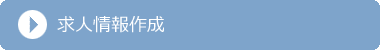
<style>
.page{position:relative;width:380px;height:50px;background:#7ea4cb}
.page>*{position:absolute;margin:0}
.t1{font:18px "Meiryo";color:#ffffff}
</style>
<div class="page">
<p class="t1" style="left:57px;top:16px;width:107px;height:17px">求人情報作成</p>
</div>
